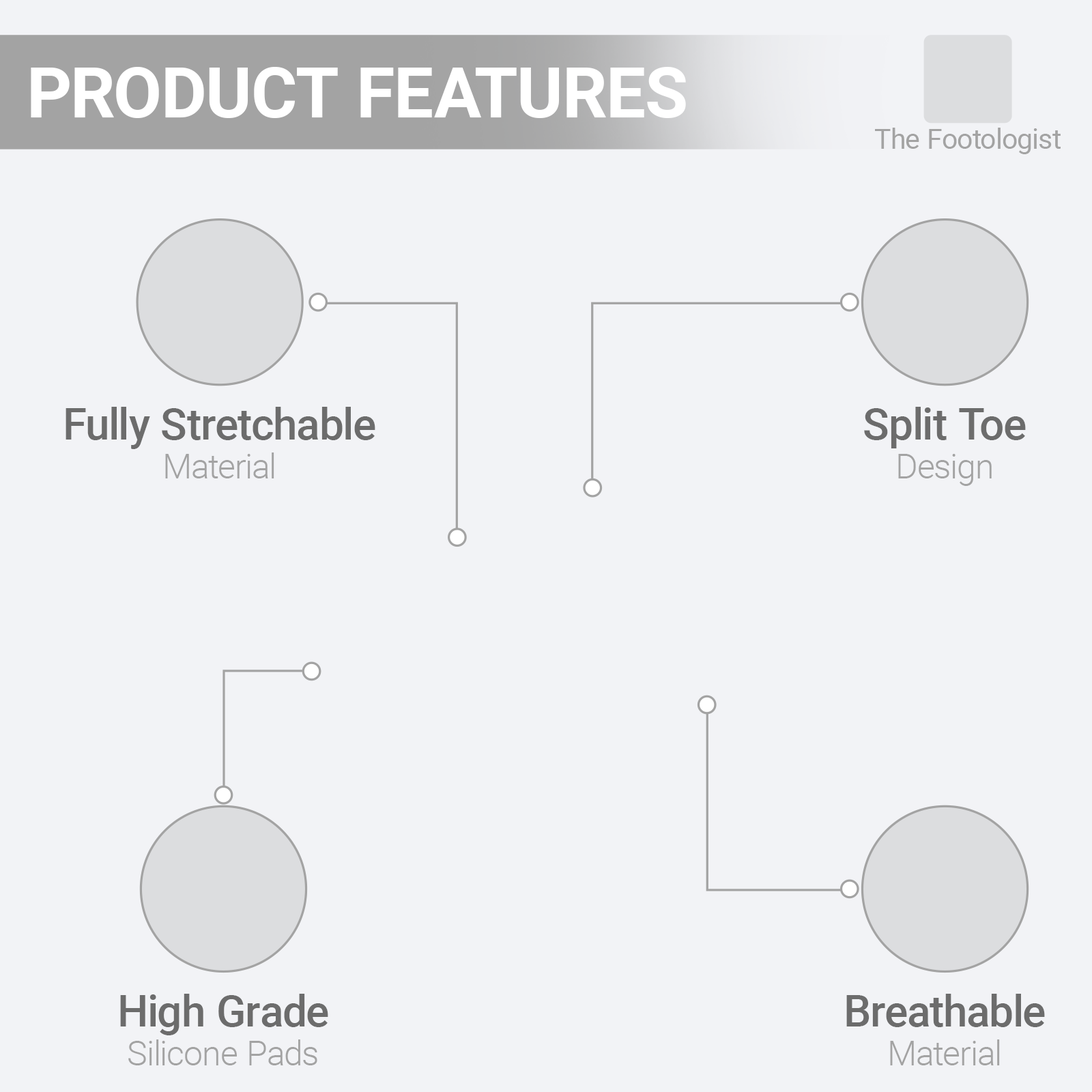
<style>
.page{position:relative;width:1092px;height:1092px;background:#f2f3f6}
.page>*{position:absolute;margin:0}
.t1{font:70.2px "Roboto-Bold";color:#ffffff}
.t2{font:27.9px "Roboto-Regular";color:#a3a3a3}
.t3{font:43.3px "Roboto-Medium";color:#6c6c6c}
.t4{font:34.1px "Roboto-Light";color:#a3a3a3}
</style>
<div class="page">
<p class="t1" style="left:31px;top:67px;width:655px;height:51px">PRODUCT FEATURES</p>
<p class="t2" style="left:875px;top:128px;width:186px;height:26px">The Footologist</p>
<p class="t3" style="left:66px;top:407px;width:309px;height:42px">Fully Stretchable</p>
<p class="t3" style="left:864px;top:407px;width:162px;height:41px">Split Toe</p>
<p class="t4" style="left:165px;top:452px;width:109px;height:26px">Material</p>
<p class="t4" style="left:898px;top:454px;width:94px;height:32px">Design</p>
<p class="t3" style="left:120px;top:994px;width:208px;height:41px">High Grade</p>
<p class="t3" style="left:846px;top:994px;width:199px;height:33px">Breathable</p>
<p class="t4" style="left:128px;top:1039px;width:189px;height:26px">Silicone Pads</p>
<p class="t4" style="left:890px;top:1039px;width:110px;height:26px">Material</p>
</div>
